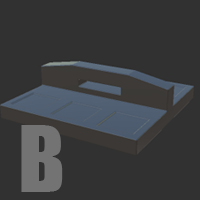
<style>
.page{position:relative;width:200px;height:200px;background:#313131}
.page>*{position:absolute;margin:0}
.t1{font:85.1px "Impact";color:#737373}
</style>
<div class="page">
<p class="t1" style="left:21px;top:125px;width:42px;height:67px">B</p>
</div>
